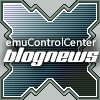
<style>
.page{position:relative;width:100px;height:100px}
.page>*{position:absolute;margin:0}
.t1{font:12px/30px "Calibri";color:#ffffff}
.t2{font:12px/18px "Calibri";color:#ffffff}
.t3{font:20px/16px "BNJinx";letter-spacing:0.005em;color:#ffffff}
</style>
<div class="page">
<p class="t1" style="left:3px;top:37px;width:96px;height:29px;text-align:center"><span class="t2">emuC</span>ontrolCenter<br><span class="t3">blognews</span></p>
</div>
